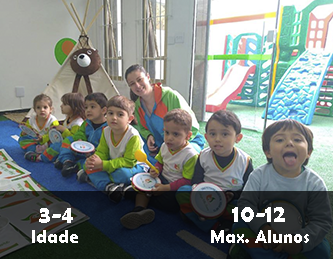
<style>
.page{position:relative;width:333px;height:259px}
.page>*{position:absolute;margin:0}
.t1{font:25.9px "BerlinSansFBDemi-Bold";color:#ffffff;scale:0.93 1}
.t2{font:19.4px "BerlinSansFBDemi-Bold";color:#ffffff;scale:0.93 1}
</style>
<div class="page">
<p class="t1" style="left:39px;top:208px;width:34px;height:15px">3-4</p>
<p class="t1" style="left:232px;top:207px;width:53px;height:15px">10-12</p>
<p class="t2" style="left:32px;top:230px;width:46px;height:13px">Idade</p>
<p class="t2" style="left:211px;top:230px;width:98px;height:13px">Max. Alunos</p>
</div>
